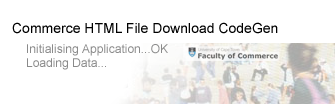
<style>
.page{position:relative;width:335px;height:104px;background:#ffffff}
.page>*{position:absolute;margin:0}
.t1{font:14px "ArialMT";color:#000000}
.t2{font:12px "ArialMT";color:#8a8a8a}
</style>
<div class="page">
<p class="t1" style="left:12px;top:22px;width:266px;height:12px">Commerce HTML File Download CodeGen</p>
<p class="t2" style="left:27px;top:44px;width:141px;height:26px">Initialising Application...OK<br>Loading Data...</p>
</div>
